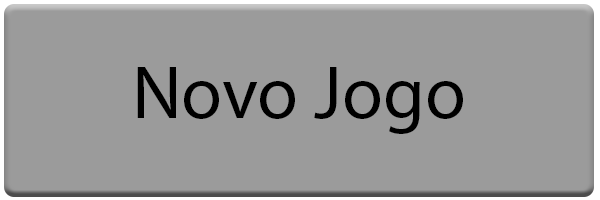
<style>
.page{position:relative;width:600px;height:200px;background:#9b9b9b}
.page>*{position:absolute;margin:0}
.t1{font:75px "MyriadPro-Regular";color:#000000}
</style>
<div class="page">
<p class="t1" style="left:137px;top:67px;width:326px;height:67px">Novo Jogo</p>
</div>
